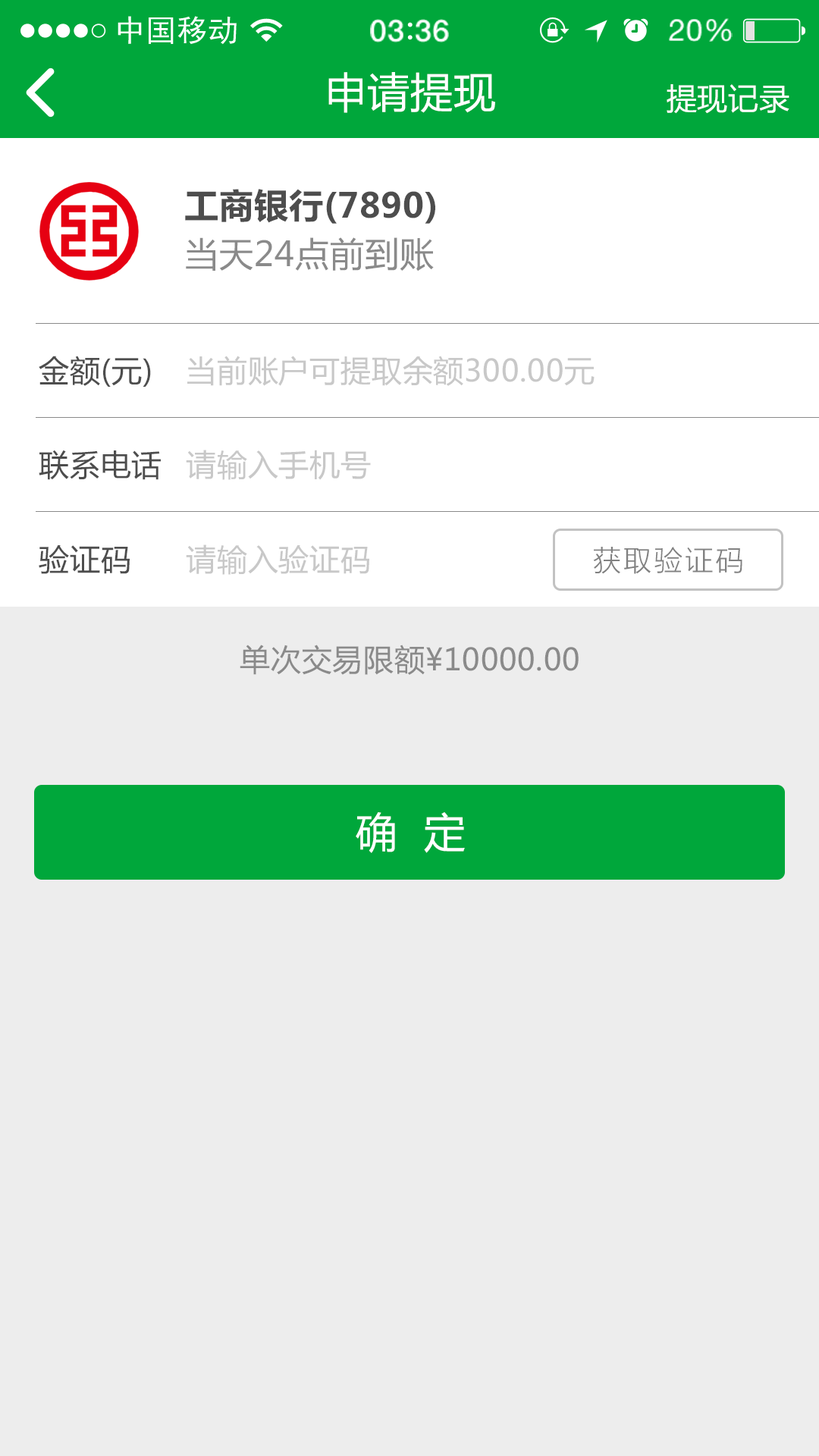
<style>
.page{position:relative;width:819px;height:1456px;background:#ededed}
.page>*{position:absolute;margin:0}
.t1{font:41.7px "MicrosoftYaHei";letter-spacing:0.02em;color:#ffffff}
.t2{font:30.3px "MicrosoftYaHei";letter-spacing:0.02em;color:#ffffff}
.t3{font:34.1px "MicrosoftYaHei-Bold";letter-spacing:0.02em;color:#4d4d4d}
.t4{font:34.1px "MicrosoftYaHei";letter-spacing:0.02em;color:#8a8a8a}
.t5{font:30.3px "MicrosoftYaHei";letter-spacing:0.02em;color:#4d4d4d}
.t6{font:30.3px "MicrosoftYaHei";letter-spacing:0.02em;color:#c8c8c8}
.t7{font:29.4px "FZLTXHK";letter-spacing:0.06em;color:#818181}
.t8{font:30.3px "MicrosoftYaHei";letter-spacing:0.02em;color:#8a8a8a}
</style>
<div class="page">
<p class="t1" style="left:328px;top:72px;width:167px;height:41px">申请提现</p>
<p class="t2" style="left:667px;top:84px;width:122px;height:30px">提现记录</p>
<p class="t3" style="left:185px;top:189px;width:250px;height:35px">工商银行(7890)</p>
<p class="t4" style="left:186px;top:237px;width:248px;height:34px">当天24点前到账</p>
<p class="t5" style="left:39px;top:356px;width:112px;height:31px">金额(元)</p>
<p class="t6" style="left:187px;top:356px;width:408px;height:30px">当前账户可提取余额300.00元</p>
<p class="t5" style="left:39px;top:450px;width:122px;height:30px">联系电话</p>
<p class="t6" style="left:186px;top:450px;width:185px;height:30px">请输入手机号</p>
<p class="t5" style="left:39px;top:545px;width:91px;height:29px">验证码</p>
<p class="t6" style="left:186px;top:544px;width:183px;height:31px">请输入验证码</p>
<p class="t7" style="left:593px;top:547px;width:149px;height:27px">获取验证码</p>
<p class="t8" style="left:240px;top:645px;width:339px;height:30px">单次交易限额¥10000.00</p>
<p class="t1" style="left:356px;top:812px;width:109px;height:41px">确  定</p>
</div>
